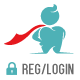
<style>
.page{position:relative;width:80px;height:80px;background:#ffffff}
.page>*{position:absolute;margin:0}
.t1{font:14.9px "Kenzo";letter-spacing:0.025em;color:#6a6a6a}
.t2{font:14.9px "Kenzo";color:#6a6a6a}
</style>
<div class="page">
<p class="t1" style="left:22px;top:63px;width:52px;height:12px">Reg<span class="t2">/</span>Login</p>
</div>
